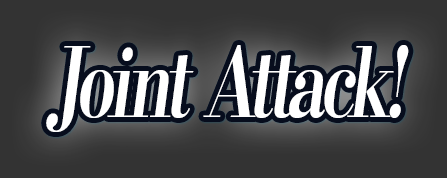
<style>
.page{position:relative;width:447px;height:178px;background:#333333}
.page>*{position:absolute;margin:0}
.t1{font:96px "KochoStd-Heavy";letter-spacing:-0.08em;color:#ffffff;font-style:italic;scale:0.75 1}
</style>
<div class="page">
<p class="t1" style="left:46px;top:45px;width:363px;height:87px">Joint Attack!</p>
</div>
